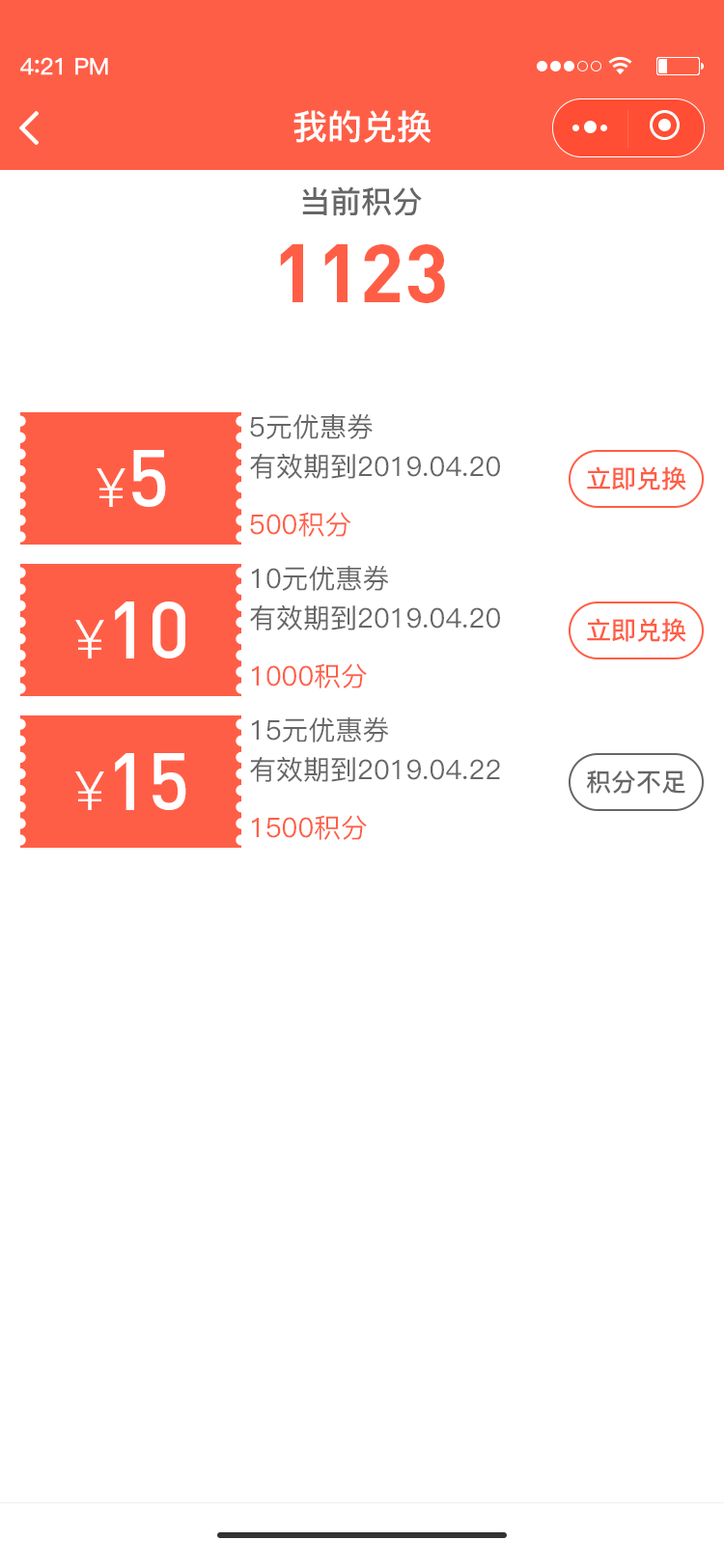
<style>
.page{position:relative;width:724px;height:1568px;background:#ffffff}
.page>*{position:absolute;margin:0}
.t1{font:23.2px "PingFang-SC-Bold";letter-spacing:-0.02em;color:#fefefe}
.t2{font:25.1px "PingFang-SC-Bold";letter-spacing:-0.02em;color:#fefefe}
.t3{font:34.8px "PingFang-SC-Bold";color:#ffffff}
.t4{font:30.9px "PingFang-SC-Bold";color:#666666}
.t5{font:81.1px "DIN-Bold";color:#ff5e46}
.t6{font:27px "PingFang-SC-Medium";color:#666666}
.t7{font:54.1px "PingFang-SC-Regular";color:#ffffff}
.t8{font:79.2px "DIN-Medium";color:#ffffff}
.t9{font:25.1px "PingFang-SC-Bold";color:#ff5e46}
.t10{font:27px "PingFang-SC-Medium";color:#ff5e46}
.t11{font:25.1px "PingFang-SC-Bold";color:#666666}
</style>
<div class="page">
<p class="t1" style="left:20px;top:57px;width:88px;height:18px">4<span class="t2">:</span>21 PM</p>
<p class="t3" style="left:294px;top:110px;width:137px;height:33px">我的兑换</p>
<p class="t4" style="left:302px;top:186px;width:120px;height:30px">当前积分</p>
<p class="t5" style="left:280px;top:244px;width:165px;height:59px">1123</p>
<p class="t6" style="left:250px;top:413px;width:123px;height:26px">5元优惠券</p>
<p class="t7" style="left:97px;top:450px;width:69px;height:57px">￥<span class="t8">5</span></p>
<p class="t6" style="left:250px;top:454px;width:250px;height:25px">有效期到2019.04.20</p>
<p class="t9" style="left:587px;top:466px;width:99px;height:24px">立即兑换</p>
<p class="t10" style="left:250px;top:512px;width:100px;height:25px">500积分</p>
<p class="t6" style="left:252px;top:565px;width:137px;height:26px">10元优惠券</p>
<p class="t8" style="left:75px;top:602px;width:110px;height:56px"><span class="t7">￥</span>10</p>
<p class="t6" style="left:250px;top:605px;width:250px;height:25px">有效期到2019.04.20</p>
<p class="t9" style="left:587px;top:618px;width:99px;height:24px">立即兑换</p>
<p class="t10" style="left:252px;top:663px;width:115px;height:25px">1000积分</p>
<p class="t6" style="left:252px;top:716px;width:137px;height:26px">15元优惠券</p>
<p class="t8" style="left:75px;top:753px;width:111px;height:57px"><span class="t7">￥</span>15</p>
<p class="t6" style="left:250px;top:757px;width:250px;height:25px">有效期到2019.04.22</p>
<p class="t11" style="left:586px;top:770px;width:100px;height:24px">积分不足</p>
<p class="t10" style="left:252px;top:815px;width:115px;height:25px">1500积分</p>
</div>
